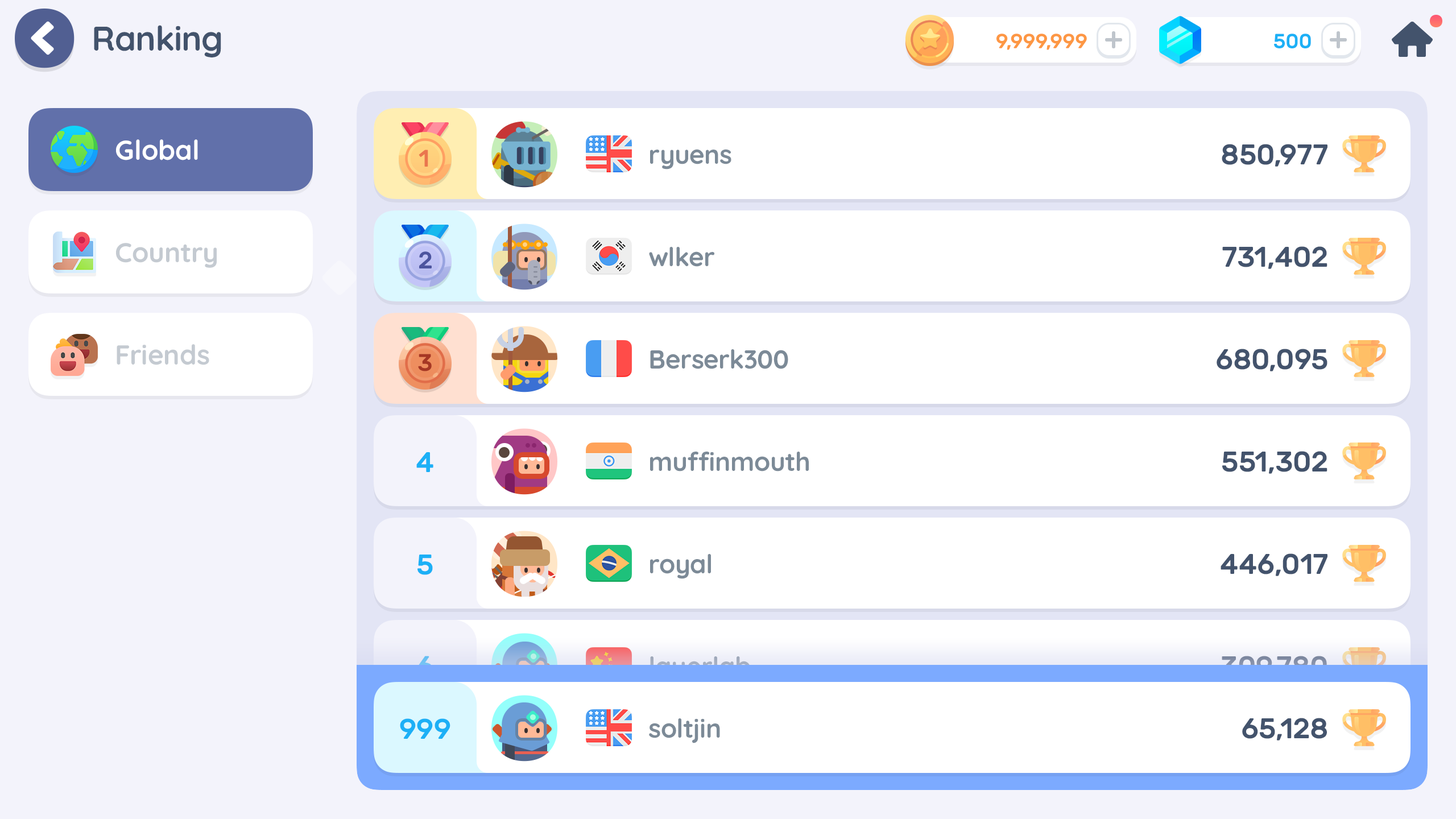
<style>
.page{position:relative;width:1456px;height:819px;background:#ffffff}
.page>*{position:absolute;margin:0}
.t1{font:34.1px "Quicksand-Bold";letter-spacing:-0.01em;color:#43536c}
.t2{font:20.5px "Rubik-Medium";letter-spacing:-0.01em;color:#fd9744;text-transform:uppercase}
.t3{font:20.5px "Rubik-Medium";letter-spacing:-0.01em;color:#1cb0f6;text-transform:uppercase}
.t4{font:27.3px "Quicksand-Bold";color:#ffffff}
.t5{font:23.9px "Rubik-Medium";letter-spacing:-0.01em;color:#ea764e}
.t6{font:26.2px "Quicksand-Bold";letter-spacing:-0.01em;color:#7c8a97}
.t7{font:28.4px "Rubik-Medium";letter-spacing:-0.01em;color:#43536c}
.t8{font:27.3px "Quicksand-Bold";color:#c4cad1}
.t9{font:23.9px "Rubik-Medium";letter-spacing:-0.01em;color:#4c549f}
.t10{font:23.9px "Rubik-Medium";letter-spacing:-0.01em;color:#a63724}
.t11{font:28.4px "Rubik-Medium";letter-spacing:-0.01em;color:#1cb0f6}
.t12{font:29.6px "Rubik-Medium";letter-spacing:-0.01em;color:#7caaff}
.t13{font:26.2px "Quicksand-Bold";letter-spacing:-0.01em;color:#7caaff}
.t14{font:28.4px "Rubik-Medium";letter-spacing:-0.01em}
</style>
<div class="page">
<p class="t1" style="left:94px;top:25px;width:127px;height:32px">Ranking</p>
<p class="t2" style="left:996px;top:34px;width:91px;height:16px">9,999,999</p>
<p class="t3" style="left:1274px;top:34px;width:37px;height:14px">500</p>
<p class="t4" style="left:116px;top:139px;width:82px;height:21px">Global</p>
<p class="t5" style="left:419px;top:150px;width:9px;height:17px">1</p>
<p class="t6" style="left:650px;top:149px;width:81px;height:20px">ryuens</p>
<p class="t7" style="left:1222px;top:144px;width:105px;height:23px">850,977</p>
<p class="t8" style="left:116px;top:243px;width:101px;height:25px">Country</p>
<p class="t9" style="left:419px;top:251px;width:13px;height:17px">2</p>
<p class="t6" style="left:649px;top:247px;width:65px;height:20px">wlker</p>
<p class="t7" style="left:1222px;top:246px;width:105px;height:23px">731,402</p>
<p class="t8" style="left:117px;top:344px;width:92px;height:21px">Friends</p>
<p class="t10" style="left:418px;top:354px;width:14px;height:17px">3</p>
<p class="t6" style="left:650px;top:349px;width:138px;height:20px">Berserk300</p>
<p class="t7" style="left:1217px;top:349px;width:110px;height:22px">680,095</p>
<p class="t11" style="left:416px;top:452px;width:17px;height:20px">4</p>
<p class="t6" style="left:650px;top:452px;width:159px;height:19px">muffinmouth</p>
<p class="t7" style="left:1222px;top:451px;width:105px;height:23px">551,302</p>
<p class="t11" style="left:417px;top:555px;width:16px;height:20px">5</p>
<p class="t6" style="left:650px;top:554px;width:61px;height:25px">royal</p>
<p class="t7" style="left:1221px;top:553px;width:106px;height:23px">446,017</p>
<p class="t12" style="left:417px;top:656px;width:16px;height:21px">6</p>
<p class="t13" style="left:650px;top:656px;width:100px;height:25px">layerlab</p>
<p class="t14" style="left:1221px;top:656px;width:106px;height:23px">309,780</p>
<p class="t11" style="left:400px;top:718px;width:50px;height:21px">999</p>
<p class="t6" style="left:649px;top:718px;width:71px;height:25px">soltjin</p>
<p class="t7" style="left:1242px;top:718px;width:85px;height:23px">65,128</p>
</div>
